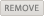
<style>
.page{position:relative;width:44px;height:16px}
.page>*{position:absolute;margin:0}
.t1{font:9px "MyriadPro-Regular";letter-spacing:0.05em;color:#80807f}
</style>
<div class="page">
<p class="t1" style="left:5px;top:4px;width:34px;height:8px">REMOVE</p>
</div>
